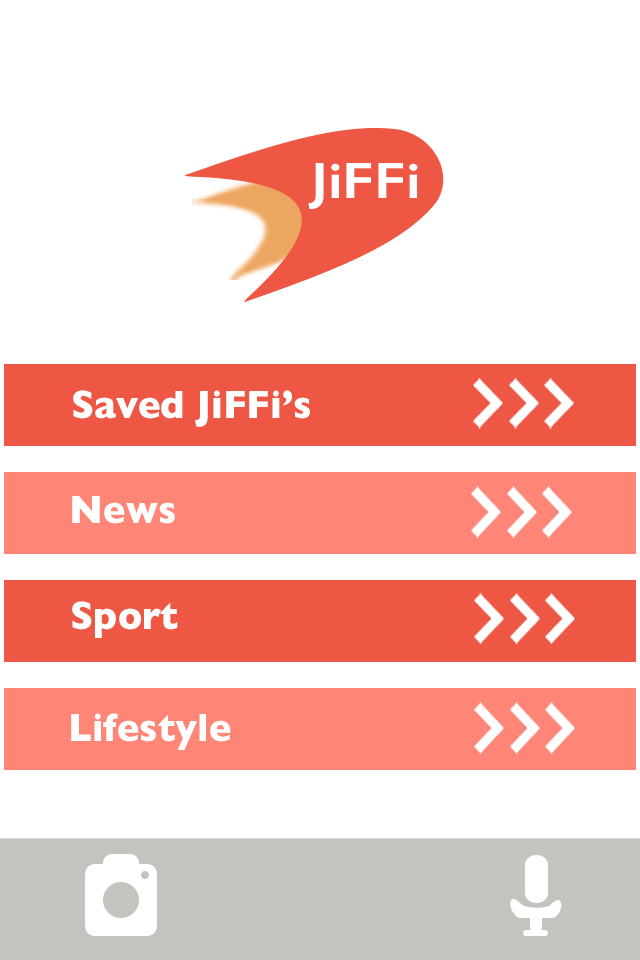
<style>
.page{position:relative;width:640px;height:960px;background:#ffffff}
.page>*{position:absolute;margin:0}
.t1{font:51.1px "GillSans-SemiBold";color:#fefefe;scale:1.16 1}
.t2{font:40px "GillSans-Bold";color:#ffffff;scale:0.95 1}
.t3{font:40px "GillSans-Bold";color:#ffffff;scale:0.94 1}
</style>
<div class="page">
<p class="t1" style="left:308px;top:163px;width:110px;height:46px">JiFFi</p>
<p class="t2" style="left:73px;top:390px;width:237px;height:37px">Saved JiFFi’s</p>
<p class="t3" style="left:72px;top:496px;width:103px;height:28px">News</p>
<p class="t2" style="left:72px;top:601px;width:106px;height:37px">Sports</p>
<p class="t3" style="left:71px;top:713px;width:160px;height:37px">Lifestyle</p>
</div>
